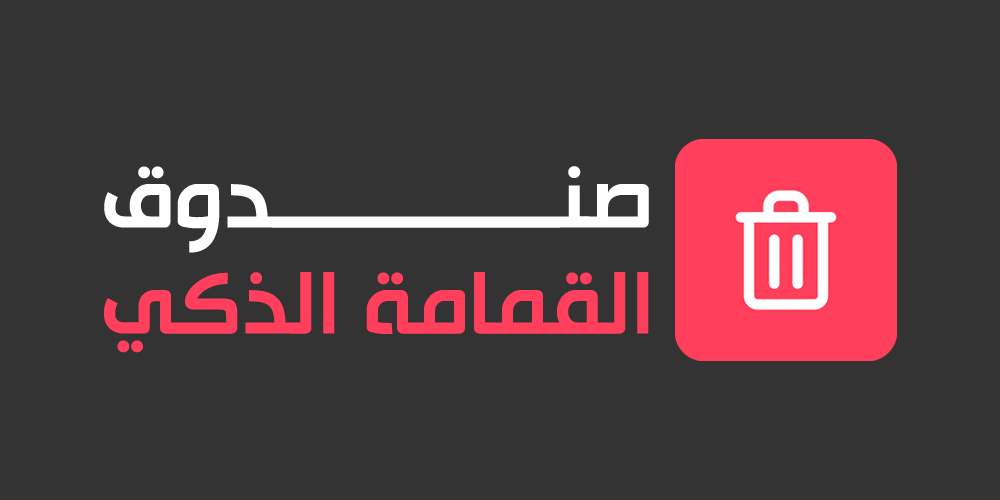
<style>
.page{position:relative;width:1000px;height:500px;background:#333333}
.page>*{position:absolute;margin:0}
.t1{font:104.2px "HacenTunisia";color:#ffffff;text-transform:uppercase}
.t2{font:104.2px "HacenTunisia";color:#ff3f5b;text-transform:uppercase}
</style>
<div class="page">
<p class="t1" style="left:104px;top:166px;width:545px;height:87px">صنـــــــــــــدوق</p>
<p class="t2" style="left:104px;top:272px;width:545px;height:81px">القمامة الذكي</p>
</div>
